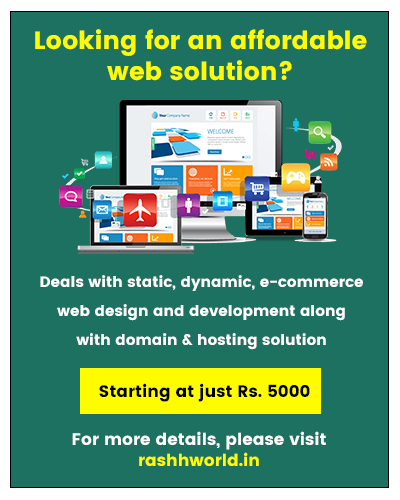
<style>
.page{position:relative;width:400px;height:500px;background:#1c7160}
.page>*{position:absolute;margin:0}
.t1{font:25px/31px "Poppins-Bold";color:#fffc00}
.t2{font:15px/29.2px "Poppins-Bold";color:#ffffff}
.t3{font:16.7px/21px "Poppins-Bold";color:#ffffff}
.t4{font:16.7px/21px "Poppins-Bold";color:#fffc00}
</style>
<div class="page">
<p class="t1" style="left:35px;top:29px;width:332px;height:52px;text-align:center">Looking for an affordable<br>web solution?</p>
<p class="t2" style="left:40px;top:275px;width:323px;height:75px;text-align:center">Deals with static, dynamic, e-commerce<br>web design and development along<br>with domain &amp; hosting solution</p>
<p class="t3" style="left:72px;top:431px;width:254px;height:35px;text-align:center">For more details, please visit<br><span class="t4">rashhworld.in</span></p>
</div>
